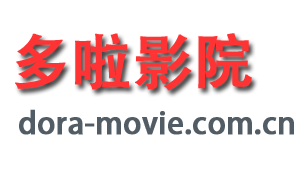
<style>
.page{position:relative;width:299px;height:179px;background:#ffffff}
.page>*{position:absolute;margin:0}
.t1{font:60px "AdobeHeitiStd-Regular";color:#ff3333;font-weight:bold}
.t2{font:30px "AdobeHeitiStd-Regular";color:#525c64;font-weight:bold}
</style>
<div class="page">
<p class="t1" style="left:15px;top:33px;width:237px;height:58px">多啦影院</p>
<p class="t2" style="left:19px;top:109px;width:275px;height:26px">dora-movie.com.cn</p>
</div>
